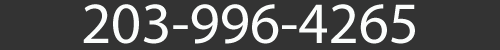
<style>
.page{position:relative;width:500px;height:50px;background:#333333}
.page>*{position:absolute;margin:0}
.t1{font:58.9px "MyriadPro-Regular";color:#fbfdfc}
</style>
<div class="page">
<p class="t1" style="left:83px;top:4px;width:332px;height:40px">203-996-4265</p>
</div>
